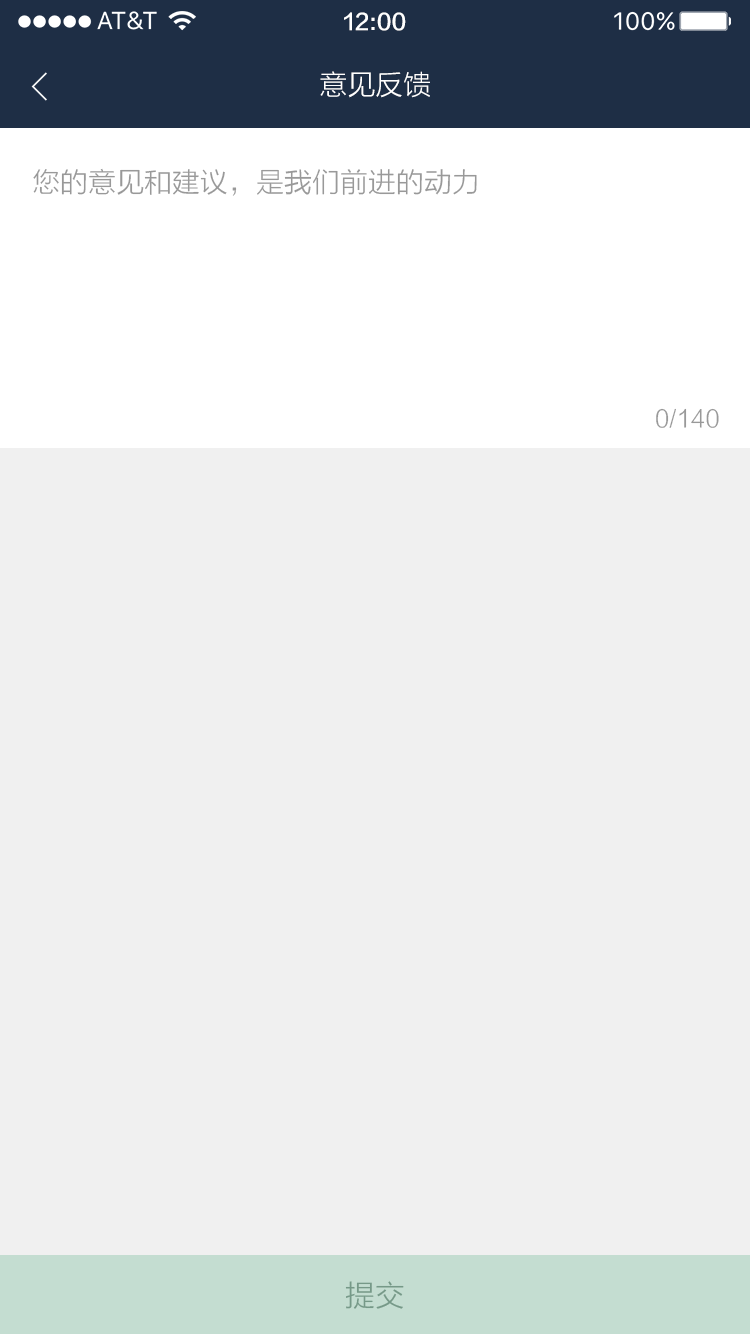
<style>
.page{position:relative;width:750px;height:1334px;background:#f0f0f0}
.page>*{position:absolute;margin:0}
.t1{font:22px "FZLTZHK--GBK1-0";color:#ffffff}
.t2{font:28px "FZLTXHK";color:#ffffff}
.t3{font:28px "FZLTXHK";color:#999999}
.t4{font:24px "FZLTXHK";color:#999999}
.t5{font:30px "FZLTXHK";color:#769988}
</style>
<div class="page">
<p class="t1" style="left:344px;top:12px;width:62px;height:19px">12:00</p>
<p class="t2" style="left:320px;top:71px;width:110px;height:27px">意见反馈</p>
<p class="t3" style="left:33px;top:168px;width:444px;height:28px">您的意见和建议，是我们前进的动力</p>
<p class="t4" style="left:656px;top:408px;width:63px;height:20px">0/140</p>
<p class="t5" style="left:345px;top:1281px;width:59px;height:28px">提交</p>
</div>
